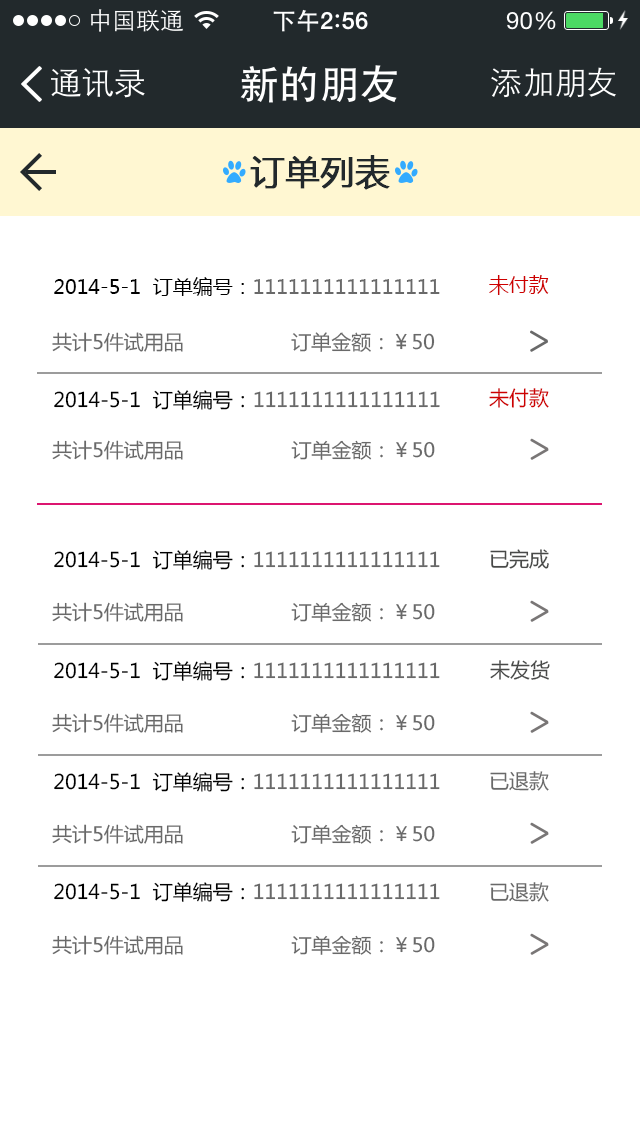
<style>
.page{position:relative;width:640px;height:1136px;background:#ffffff}
.page>*{position:absolute;margin:0}
.t1{font:34px "MicrosoftYaHei";color:#22292c;font-weight:bold}
.t2{font:20px "MicrosoftYaHei";color:#696969}
.t3{font:20px "MicrosoftYaHei";color:#000000}
.t4{font:20px "MicrosoftYaHei";color:#ce0000}
.t5{font:19.7px "MicrosoftYaHei";color:#696969}
.t6{font:19.9px "MicrosoftYaHei";color:#ce0000}
.t7{font:19.6px "MicrosoftYaHei";color:#696969}
.t8{font:19.9px "MicrosoftYaHei";color:#484948}
.t9{font:20px "MicrosoftYaHei";color:#010101}
.t10{font:19.9px "MicrosoftYaHei";color:#696969}
</style>
<div class="page">
<p class="t1" style="left:250px;top:155px;width:140px;height:35px">订单列表</p>
<p class="t2" style="left:54px;top:277px;width:386px;height:19px"><span class="t3">2014-5-1  订单编号：</span>1111111111111111</p>
<p class="t4" style="left:489px;top:275px;width:60px;height:20px">未付款</p>
<p class="t5" style="left:52px;top:332px;width:131px;height:20px">共计5件试用品</p>
<p class="t5" style="left:291px;top:332px;width:144px;height:20px">订单金额：￥50</p>
<p class="t2" style="left:54px;top:390px;width:386px;height:20px"><span class="t3">2014-5-1  订单编号：</span>1111111111111111</p>
<p class="t6" style="left:489px;top:388px;width:60px;height:20px">未付款</p>
<p class="t7" style="left:52px;top:440px;width:131px;height:20px">共计5件试用品</p>
<p class="t7" style="left:291px;top:440px;width:144px;height:20px">订单金额：￥50</p>
<p class="t2" style="left:54px;top:550px;width:386px;height:20px"><span class="t3">2014-5-1  订单编号：</span>1111111111111111</p>
<p class="t8" style="left:490px;top:549px;width:59px;height:20px">已完成</p>
<p class="t7" style="left:52px;top:602px;width:131px;height:20px">共计5件试用品</p>
<p class="t7" style="left:291px;top:602px;width:144px;height:20px">订单金额：￥50</p>
<p class="t2" style="left:54px;top:661px;width:386px;height:20px"><span class="t3">2014-5-1  订单编号：</span>1111111111111111</p>
<p class="t8" style="left:490px;top:660px;width:60px;height:20px">未发货</p>
<p class="t7" style="left:52px;top:713px;width:131px;height:20px">共计5件试用品</p>
<p class="t7" style="left:291px;top:713px;width:144px;height:20px">订单金额：￥50</p>
<p class="t2" style="left:54px;top:772px;width:386px;height:20px"><span class="t9">2014-5-1  订单编号：</span>1111111111111111</p>
<p class="t10" style="left:490px;top:771px;width:59px;height:20px">已退款</p>
<p class="t7" style="left:52px;top:824px;width:131px;height:20px">共计5件试用品</p>
<p class="t7" style="left:291px;top:824px;width:144px;height:20px">订单金额：￥50</p>
<p class="t2" style="left:54px;top:882px;width:386px;height:20px"><span class="t3">2014-5-1  订单编号：</span>1111111111111111</p>
<p class="t10" style="left:490px;top:882px;width:59px;height:20px">已退款</p>
<p class="t7" style="left:52px;top:935px;width:131px;height:20px">共计5件试用品</p>
<p class="t7" style="left:291px;top:935px;width:144px;height:20px">订单金额：￥50</p>
</div>
